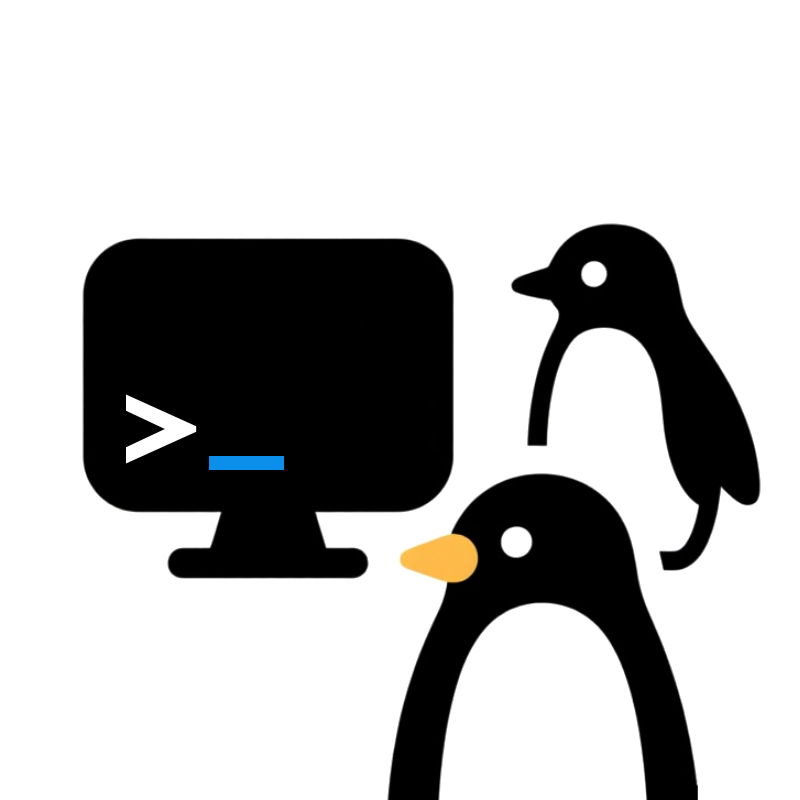
<style>
.page{position:relative;width:800px;height:800px;background:#ffffff}
.page>*{position:absolute;margin:0}
.t1{font:150px "AurulentSans-Bold";color:#ffffff}
.t2{font:150px "AurulentSans-Bold";color:#0c8fea}
</style>
<div class="page">
<p class="t1" style="left:126px;top:394px;width:71px;height:70px">&gt;</p>
<p class="t2" style="left:209px;top:456px;width:75px;height:15px">_</p>
</div>
